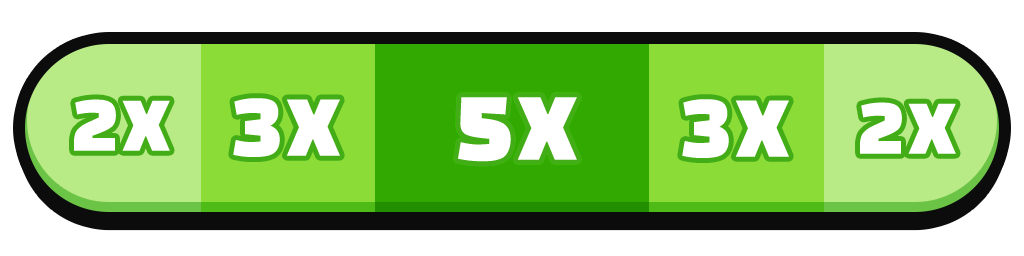
<style>
.page{position:relative;width:1024px;height:256px;background:#ffffff}
.page>*{position:absolute;margin:0}
.t1{font:80px "ChangaOne";letter-spacing:0.04em;color:#ffffff}
.t2{font:90px "ChangaOne";letter-spacing:0.04em;color:#ffffff}
.t3{font:100px "ChangaOne";letter-spacing:0.04em;color:#ffffff}
</style>
<div class="page">
<p class="t1" style="left:74px;top:99px;width:96px;height:52px">2X</p>
<p class="t2" style="left:233px;top:98px;width:107px;height:59px">3X</p>
<p class="t3" style="left:458px;top:97px;width:119px;height:65px">5X</p>
<p class="t2" style="left:682px;top:99px;width:107px;height:59px">3X</p>
<p class="t1" style="left:860px;top:102px;width:96px;height:52px">2X</p>
</div>
